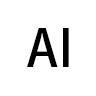
<style>
.page{position:relative;width:96px;height:96px;background:#ffffff}
.page>*{position:absolute;margin:0}
.t1{font:50px "AdobeHeitiStd-Regular";color:#000000}
</style>
<div class="page">
<p class="t1" style="left:27px;top:28px;width:42px;height:39px">AI</p>
</div>
